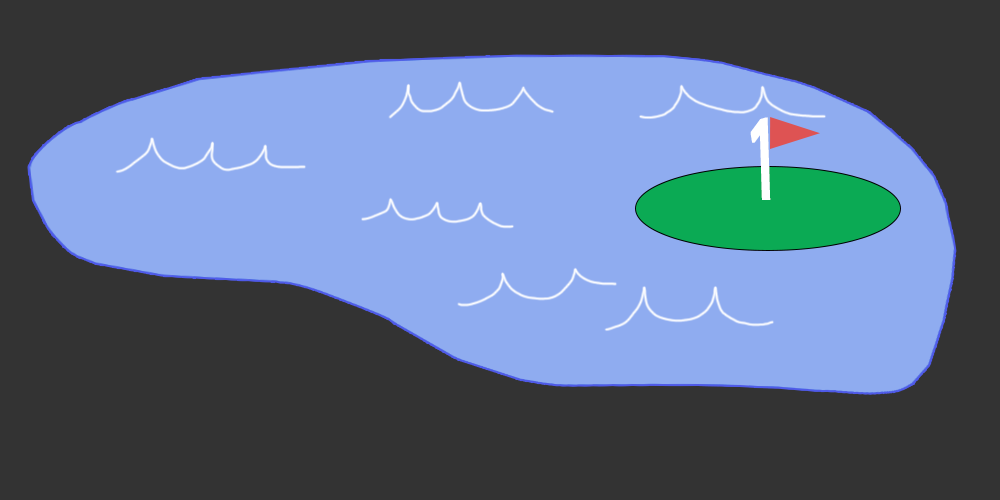
<style>
.page{position:relative;width:1000px;height:500px;background:#333333}
.page>*{position:absolute;margin:0}
.t1{font:127.3px "MyriadPro-Regular";color:#ffffff;font-weight:bold;font-style:italic;scale:0.57 1}
</style>
<div class="page">
<p class="t1" style="left:750px;top:117px;width:21px;height:90px;rotate:-17deg">1</p>
</div>
